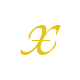
<style>
.page{position:relative;width:80px;height:80px;background:#ffffff}
.page>*{position:absolute;margin:0}
.t1{font:75px "Vivaldii";color:#e6c319}
</style>
<div class="page">
<p class="t1" style="left:20px;top:25px;width:41px;height:30px">x</p>
</div>
